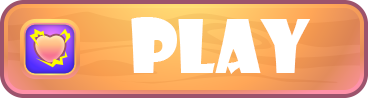
<style>
.page{position:relative;width:368px;height:98px}
.page>*{position:absolute;margin:0}
.t1{font:72px "ShowcardGothic-Reg";color:#ffffff}
</style>
<div class="page">
<p class="t1" style="left:131px;top:17px;width:179px;height:57px">Play</p>
</div>
